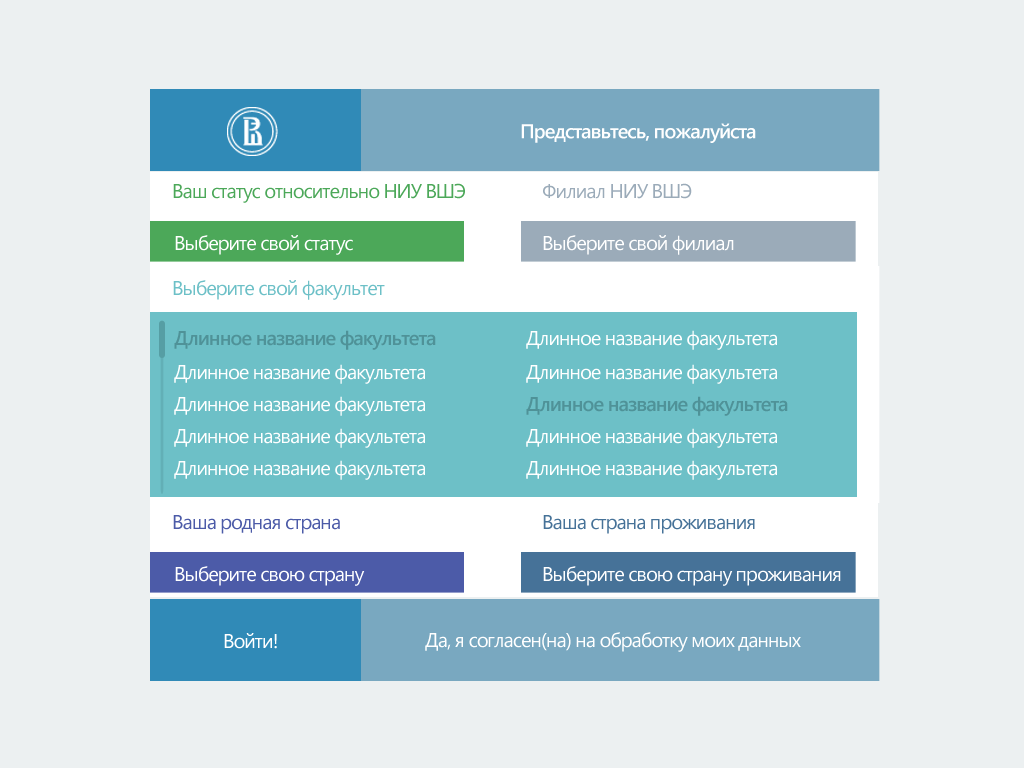
<style>
.page{position:relative;width:1024px;height:768px;background:#ecf0f1}
.page>*{position:absolute;margin:0}
.t1{font:20px "SegoeUI-SemiBold";letter-spacing:-0.05em;color:#ffffff}
.t2{font:20px "SegoeUI";letter-spacing:-0.05em;color:#4ca859}
.t3{font:20px "SegoeUI";letter-spacing:-0.05em;color:#9babb9}
.t4{font:20px "SegoeUI";letter-spacing:-0.05em;color:#ffffff}
.t5{font:20px "SegoeUI";letter-spacing:-0.05em;color:#6dc0c7}
.t6{font:20px/30px "SegoeUI";letter-spacing:-0.05em;color:#ffffff}
.t7{font:20px/15px "SegoeUI-SemiBold";letter-spacing:-0.05em;color:#4f9298}
.t8{font:20px/15px "SegoeUI";letter-spacing:-0.05em;color:#ffffff}
.t9{font:20px/30px "SegoeUI-SemiBold";letter-spacing:-0.05em;color:#4f9298}
.t10{font:20px "SegoeUI";letter-spacing:-0.05em;color:#4c5ba8}
.t11{font:20px "SegoeUI";letter-spacing:-0.05em;color:#467298}
</style>
<div class="page">
<p class="t1" style="left:521px;top:123px;width:235px;height:20px">Представьтесь, пожалуйста</p>
<p class="t2" style="left:173px;top:183px;width:292px;height:20px">Ваш статус относительно НИУ ВШЭ</p>
<p class="t3" style="left:543px;top:183px;width:149px;height:16px">Филиал НИУ ВШЭ</p>
<p class="t4" style="left:175px;top:235px;width:178px;height:20px">Выберите свой статус</p>
<p class="t4" style="left:543px;top:235px;width:191px;height:20px">Выберите свой филиал</p>
<p class="t5" style="left:173px;top:280px;width:212px;height:20px">Выберите свой факультет</p>
<p class="t6" style="left:174px;top:330px;width:262px;height:150px"><span class="t7">Длинное название факультета<br><br></span><span class="t8">Длинное название факультета<br></span>Длинное название факультета<br>Длинное название факультета<br>Длинное название факультета</p>
<p class="t8" style="left:526px;top:330px;width:262px;height:150px">Длинное название факультета<br><br>Длинное название факультета<br><span class="t9">Длинное название факультета<br></span><span class="t6">Длинное название факультета<br>Длинное название факультета</span></p>
<p class="t10" style="left:173px;top:515px;width:167px;height:19px">Ваша родная страна</p>
<p class="t11" style="left:543px;top:515px;width:212px;height:19px">Ваша страна проживания</p>
<p class="t4" style="left:175px;top:566px;width:190px;height:20px">Выберите свою страну</p>
<p class="t4" style="left:543px;top:566px;width:298px;height:20px">Выберите свою страну проживания</p>
<p class="t4" style="left:224px;top:633px;width:53px;height:16px">Войти!</p>
<p class="t4" style="left:425px;top:632px;width:376px;height:20px">Да, я согласен(на) на обработку моих данных</p>
</div>
